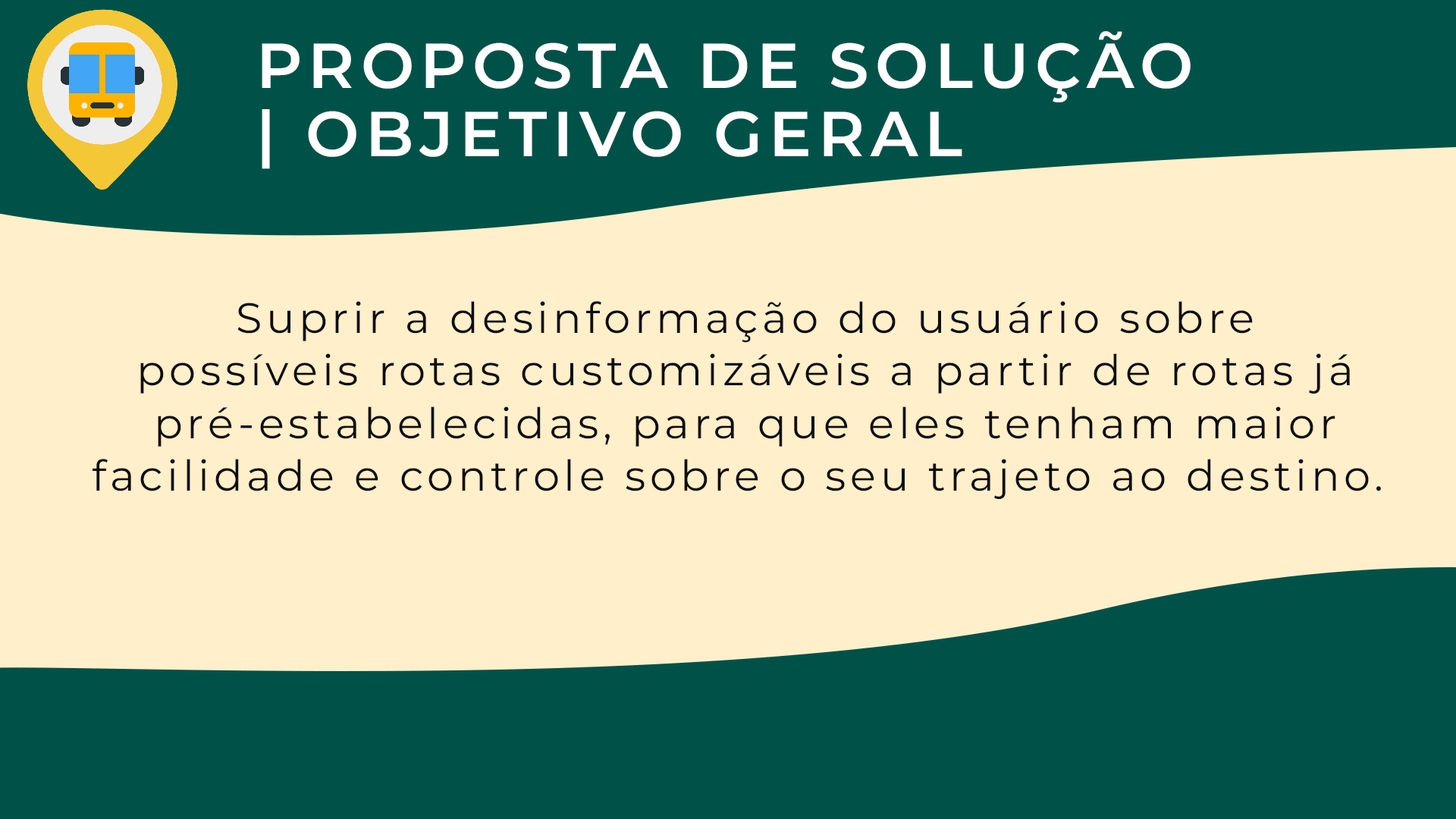
<style>
.page{position:relative;width:1456px;height:819px;background:#ffefca}
.page>*{position:absolute;margin:0}
.t1{font:63.4px/68.3px "MontserratRoman-SemiBold";letter-spacing:0.1em;color:#ffffff}
.t2{font:42.4px/52.8px "MontserratRoman-Regular";letter-spacing:0.1em;color:#0d0d0d}
</style>
<div class="page">
<p class="t1" style="left:262px;top:31px;width:929px;height:138px">PROPOSTA DE SOLUÇÃO<br>| OBJETIVO GERAL</p>
<p class="t2" style="left:93px;top:301px;width:1288px;height:199px;text-align:center">Suprir a desinformação do usuário sobre<br>possíveis rotas customizáveis a partir de rotas já<br>pré-estabelecidas, para que eles tenham maior<br>facilidade e controle sobre o seu trajeto ao destino.</p>
</div>
